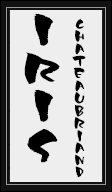
<style>
.page{position:relative;width:112px;height:192px;background:#eeeeee}
.page>*{position:absolute;margin:0}
.t1{font:53.3px/40px "YAKITORI";color:#000000;scale:1.3 1}
.t2{font:49.3px/37.3px "YAKITORI";color:#000000;scale:1.3 1}
.t3{font:53.3px/38.7px "YAKITORI";color:#000000;scale:1.3 1}
.t4{font:18.7px/12.3px "YAKITORI";color:#000000}
.t5{font:18.7px/12.8px "YAKITORI";color:#000000}
.t6{font:18.7px/12px "YAKITORI";color:#000000}
.t7{font:18.7px/13.3px "YAKITORI";color:#000000}
</style>
<div class="page">
<p class="t1" style="left:24px;top:13px;width:36px;height:150px;text-align:center">I<br><span class="t2">R<br></span><span class="t3">I<br></span>S</p>
<p class="t4" style="left:72px;top:18px;width:14px;height:160px;text-align:center">C<br>H<br><span class="t5">A<br></span>T<br><span class="t6">E<br></span>A<br>U<br><span class="t7">B<br></span>R<br>I<br>A<br>N<br>D</p>
</div>
